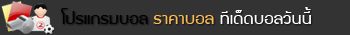
<style>
.page{position:relative;width:350px;height:35px;background:#333333}
.page>*{position:absolute;margin:0}
.t1{font:18.4px "supermarket";color:#ffffff;scale:1.09 1}
.t2{font:18.4px "supermarket";color:#010101;scale:1.09 1}
.t3{font:18.4px "supermarket";color:#fabb55;scale:1.09 1}
</style>
<div class="page">
<p class="t1" style="left:60px;top:7px;width:251px;height:17px"><span class="t2">โปรแกรมบอล </span><span class="t3">ราคาบอล </span>ทีเด็ดบอลวันนี้</p>
</div>
